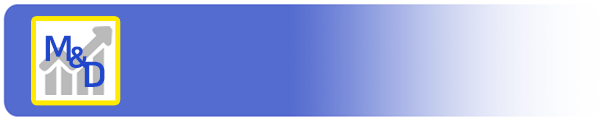
<style>
.page{position:relative;width:600px;height:120px;background:#546ccf}
.page>*{position:absolute;margin:0}
.t1{font:35px "NanumSquareEB";color:#1f47cb}
.t2{font:29.2px "NanumSquareEB";color:#1f47cb}
</style>
<div class="page">
<p class="t1" style="left:45px;top:35px;width:26px;height:26px">M</p>
<p class="t2" style="left:69px;top:46px;width:20px;height:22px">&amp;</p>
<p class="t1" style="left:84px;top:61px;width:21px;height:26px">D</p>
</div>
